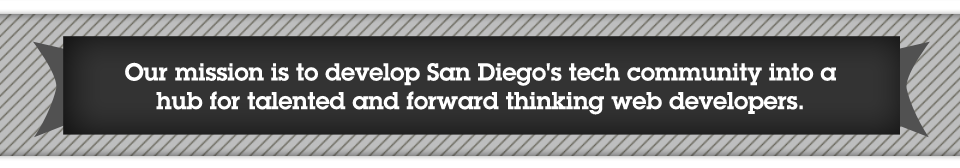
<style>
.page{position:relative;width:960px;height:168px}
.page>*{position:absolute;margin:0}
.t1{font:23.9px "LubalinGraphStd-Demi";color:#ffffff}
</style>
<div class="page">
<p class="t1" style="left:125px;top:62px;width:711px;height:53px;text-align:center">Our mission is to develop San Diego's tech community into a<br>hub for talented and forward thinking web developers.</p>
</div>
